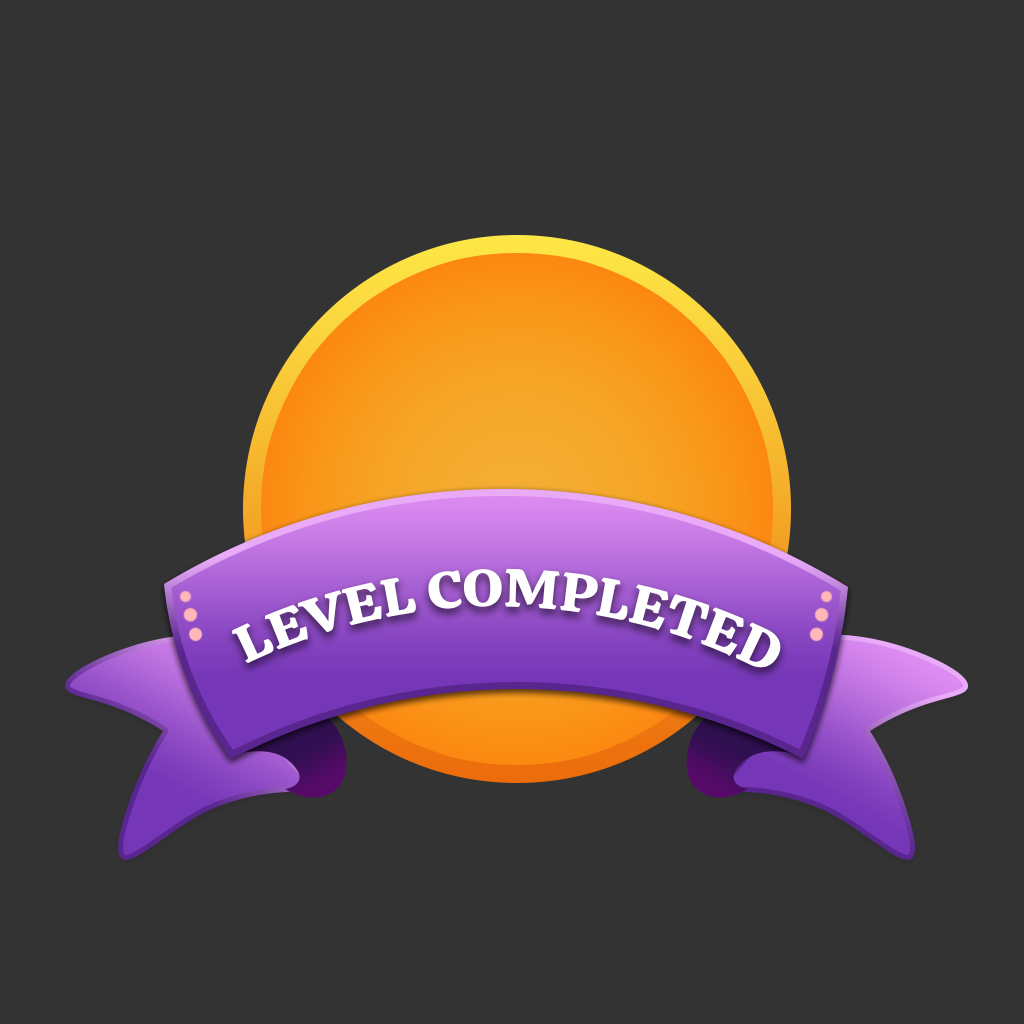
<style>
.page{position:relative;width:1024px;height:1024px;background:#333333}
.page>*{position:absolute;margin:0}
.t1{font:56.2px "Calistoga-Regular";color:#ffffff}
</style>
<div class="page">
<p class="t1" style="left:232px;top:568px;width:549px;height:100px;rotate:1deg">LEVEL COMPLETED</p>
</div>
